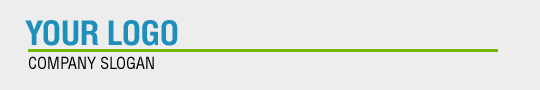
<style>
.page{position:relative;width:540px;height:90px;background:#ededed}
.page>*{position:absolute;margin:0}
.t1{font:34px "HeliosCondBold";color:#1e8fbb;text-transform:uppercase}
.t2{font:17px "HeliosCond";color:#000000;text-transform:uppercase}
</style>
<div class="page">
<p class="t1" style="left:25px;top:20px;width:153px;height:26px">YOUR LOGO</p>
<p class="t2" style="left:29px;top:56px;width:125px;height:13px">company slogan</p>
</div>
